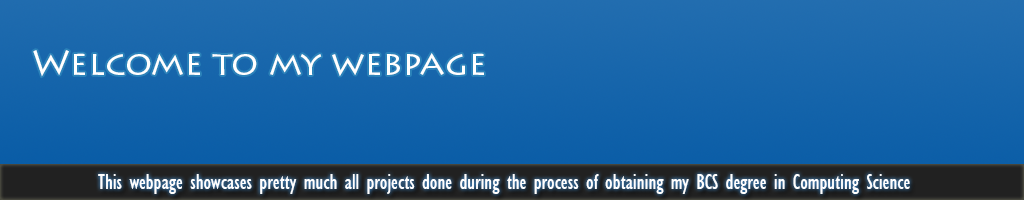
<style>
.page{position:relative;width:1024px;height:200px}
.page>*{position:absolute;margin:0}
.t1{font:35px "LithosPro-Regular";color:#ffffff}
.t2{font:22px "GillSansMT-Condensed";color:#ffffff}
</style>
<div class="page">
<p class="t1" style="left:33px;top:50px;width:451px;height:27px">Welcome to my webpage</p>
<p class="t2" style="left:98px;top:174px;width:812px;height:20px">This webpage showcases pretty much all projects done during the process of obtaining my BCS degree in Computing Science</p>
</div>
